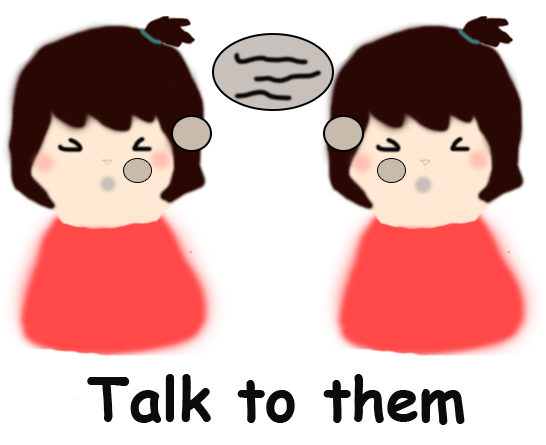
<style>
.page{position:relative;width:546px;height:445px;background:#ffffff}
.page>*{position:absolute;margin:0}
.t1{font:60px "ComicSansMS-Bold";color:#0b0b0a}
</style>
<div class="page">
<p class="t1" style="left:87px;top:374px;width:378px;height:51px">Talk to them</p>
</div>
